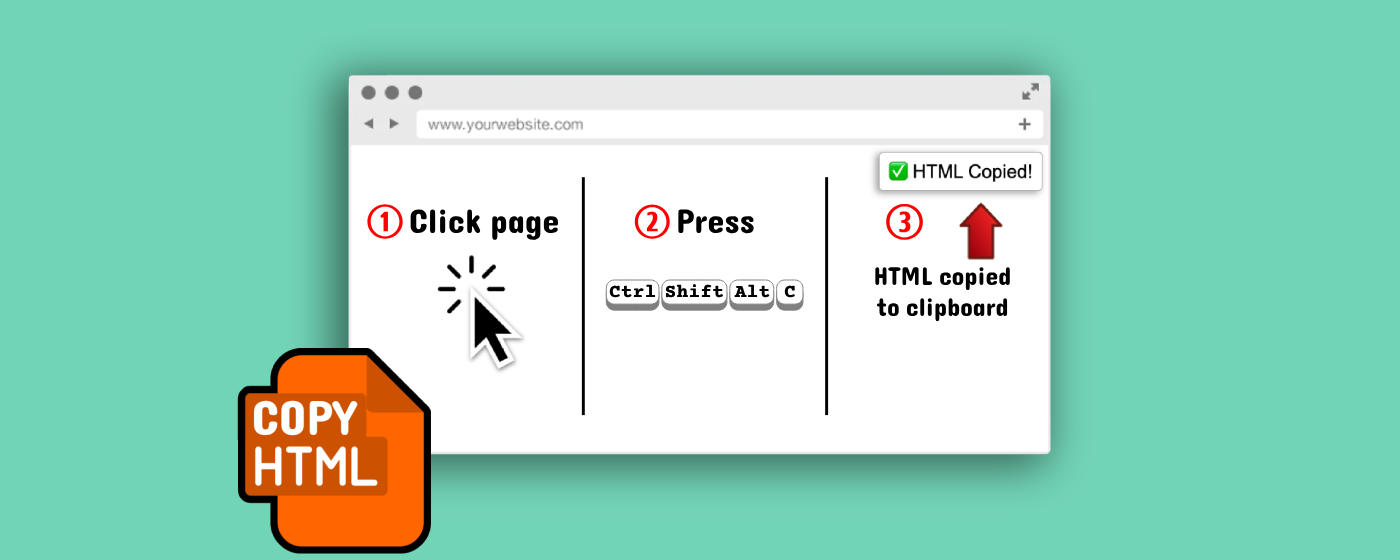
<style>
.page{position:relative;width:1400px;height:560px;background:#72d4b7}
.page>*{position:absolute;margin:0}
.t1{font:45.6px "CombiNumeralsLtd";color:#ff0000;font-weight:bold}
.t2{font:34.3px "Dangrek-Regular";color:#000000}
.t3{font:45.1px "CombiNumeralsLtd";color:#ff0000;font-weight:bold}
.t4{font:47.4px "CombiNumeralsLtd";color:#ff0000;font-weight:bold}
.t5{font:25.8px "Dangrek-Regular";color:#000000}
.t6{font:19px "CourierPrime-Bold";color:#000000;font-weight:bold}
</style>
<div class="page">
<p class="t1" style="left:367px;top:204px;width:36px;height:35px">1</p>
<p class="t2" style="left:410px;top:209px;width:148px;height:31px">Click page</p>
<p class="t3" style="left:634px;top:204px;width:36px;height:35px">2</p>
<p class="t2" style="left:678px;top:209px;width:76px;height:25px">Press</p>
<p class="t4" style="left:886px;top:204px;width:37px;height:36px">3</p>
<p class="t5" style="left:875px;top:267px;width:135px;height:54px;text-align:center">HTML copied<br>to clipboard</p>
<p class="t6" style="left:609px;top:284px;width:47px;height:14px">Ctrl</p>
<p class="t6" style="left:665px;top:284px;width:58px;height:14px">Shift</p>
<p class="t6" style="left:734px;top:284px;width:36px;height:14px">Alt</p>
<p class="t6" style="left:784px;top:285px;width:11px;height:13px">C</p>
</div>
